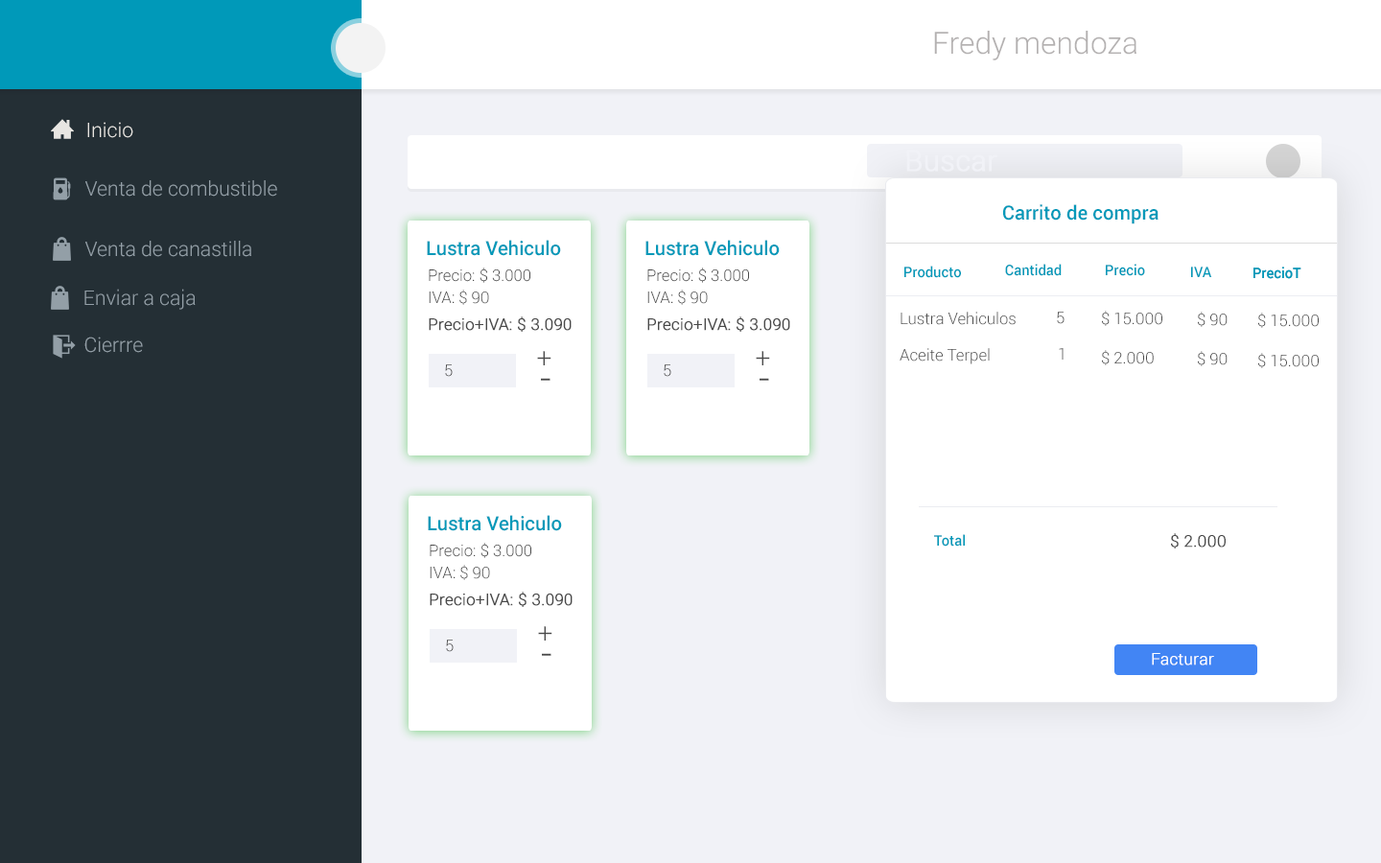
<style>
.page{position:relative;width:1381px;height:863px;background:#ffffff}
.page>*{position:absolute;margin:0}
.t1{font:30.7px "Roboto-Light";color:#b4b1b1}
.t2{font:20.3px "Roboto-Light";color:#e8e6e2}
.t3{font:29px "Roboto-Light";color:#f1f2f7;font-weight:bold}
.t4{font:20.3px "Roboto-Light";color:#939fa7}
.t5{font:19.6px "Roboto-Medium";color:#0099b9}
.t6{font:16.2px "Roboto-Light";color:#494949}
.t7{font:14.7px "Roboto-Medium";color:#0099b9;scale:0.96 1}
.t8{font:16.2px "Roboto-Light";color:#494949;font-weight:bold}
.t9{font:27px "Roboto-Light";color:#494949}
.t10{font:16.2px "Roboto-Light"}
.t11{font:39.2px "Roboto-Light";color:#494949}
.t12{font:16.2px "Roboto-Light";color:#ffffff;font-weight:bold}
</style>
<div class="page">
<p class="t1" style="left:934px;top:31px;width:203px;height:29px">Fredy mendoza</p>
<p class="t2" style="left:87px;top:122px;width:46px;height:16px">Inicio</p>
<p class="t3" style="left:906px;top:150px;width:92px;height:22px">Buscar</p>
<p class="t4" style="left:85px;top:180px;width:192px;height:17px">Venta de combustible</p>
<p class="t5" style="left:1003px;top:204px;width:156px;height:20px">Carrito de compra</p>
<p class="t4" style="left:85px;top:241px;width:166px;height:16px">Venta de canastilla</p>
<p class="t5" style="left:427px;top:240px;width:134px;height:16px">Lustra Vehiculo</p>
<p class="t5" style="left:646px;top:240px;width:134px;height:16px">Lustra Vehiculo</p>
<p class="t6" style="left:429px;top:268px;width:101px;height:15px">Precio: $ 3.000</p>
<p class="t6" style="left:647px;top:268px;width:102px;height:15px">Precio: $ 3.000</p>
<p class="t7" style="left:905px;top:266px;width:56px;height:12px">Producto</p>
<p class="t7" style="left:1005px;top:264px;width:57px;height:12px">Cantidad</p>
<p class="t7" style="left:1106px;top:264px;width:39px;height:12px">Precio</p>
<p class="t7" style="left:1191px;top:267px;width:21px;height:10px">IVA</p>
<p class="t7" style="left:1254px;top:267px;width:48px;height:12px">PrecioT</p>
<p class="t7" style="left:1254px;top:267px;width:48px;height:12px">PrecioT</p>
<p class="t4" style="left:84px;top:289px;width:112px;height:21px">Enviar a caja</p>
<p class="t6" style="left:429px;top:290px;width:60px;height:15px">IVA: $ 90</p>
<p class="t6" style="left:647px;top:290px;width:61px;height:15px">IVA: $ 90</p>
<p class="t8" style="left:429px;top:317px;width:143px;height:15px">Precio+IVA: $ 3.090</p>
<p class="t8" style="left:647px;top:317px;width:143px;height:15px">Precio+IVA: $ 3.090</p>
<p class="t6" style="left:901px;top:312px;width:115px;height:13px">Lustra Vehiculos</p>
<p class="t6" style="left:1057px;top:312px;width:8px;height:12px">5</p>
<p class="t6" style="left:1102px;top:311px;width:61px;height:15px">$ 15.000</p>
<p class="t6" style="left:1198px;top:312px;width:30px;height:15px">$ 90</p>
<p class="t6" style="left:1258px;top:313px;width:61px;height:15px">$ 15.000</p>
<p class="t4" style="left:84px;top:337px;width:59px;height:16px">Cierrre</p>
<p class="t9" style="left:537px;top:351px;width:15px;height:14px">+</p>
<p class="t9" style="left:756px;top:351px;width:14px;height:14px">+</p>
<p class="t6" style="left:900px;top:348px;width:90px;height:17px">Aceite Terpel</p>
<p class="t10" style="left:1059px;top:348px;width:5px;height:12px">1</p>
<p class="t6" style="left:1102px;top:350px;width:52px;height:15px">$ 2.000</p>
<p class="t6" style="left:1198px;top:351px;width:30px;height:15px">$ 90</p>
<p class="t6" style="left:1258px;top:353px;width:61px;height:15px">$ 15.000</p>
<p class="t6" style="left:445px;top:365px;width:8px;height:12px">5</p>
<p class="t6" style="left:664px;top:365px;width:7px;height:12px">5</p>
<p class="t11" style="left:541px;top:378px;width:10px;height:3px">-</p>
<p class="t11" style="left:760px;top:378px;width:9px;height:3px">-</p>
<p class="t5" style="left:428px;top:515px;width:134px;height:16px">Lustra Vehiculo</p>
<p class="t8" style="left:1171px;top:533px;width:55px;height:16px">$ 2.000</p>
<p class="t6" style="left:430px;top:543px;width:101px;height:15px">Precio: $ 3.000</p>
<p class="t7" style="left:934px;top:534px;width:31px;height:13px">Total</p>
<p class="t6" style="left:430px;top:565px;width:60px;height:15px">IVA: $ 90</p>
<p class="t8" style="left:430px;top:592px;width:143px;height:15px">Precio+IVA: $ 3.090</p>
<p class="t9" style="left:538px;top:626px;width:15px;height:15px">+</p>
<p class="t6" style="left:446px;top:640px;width:8px;height:12px">5</p>
<p class="t11" style="left:542px;top:653px;width:10px;height:3px">-</p>
<p class="t12" style="left:1152px;top:653px;width:62px;height:13px">Facturar</p>
</div>
